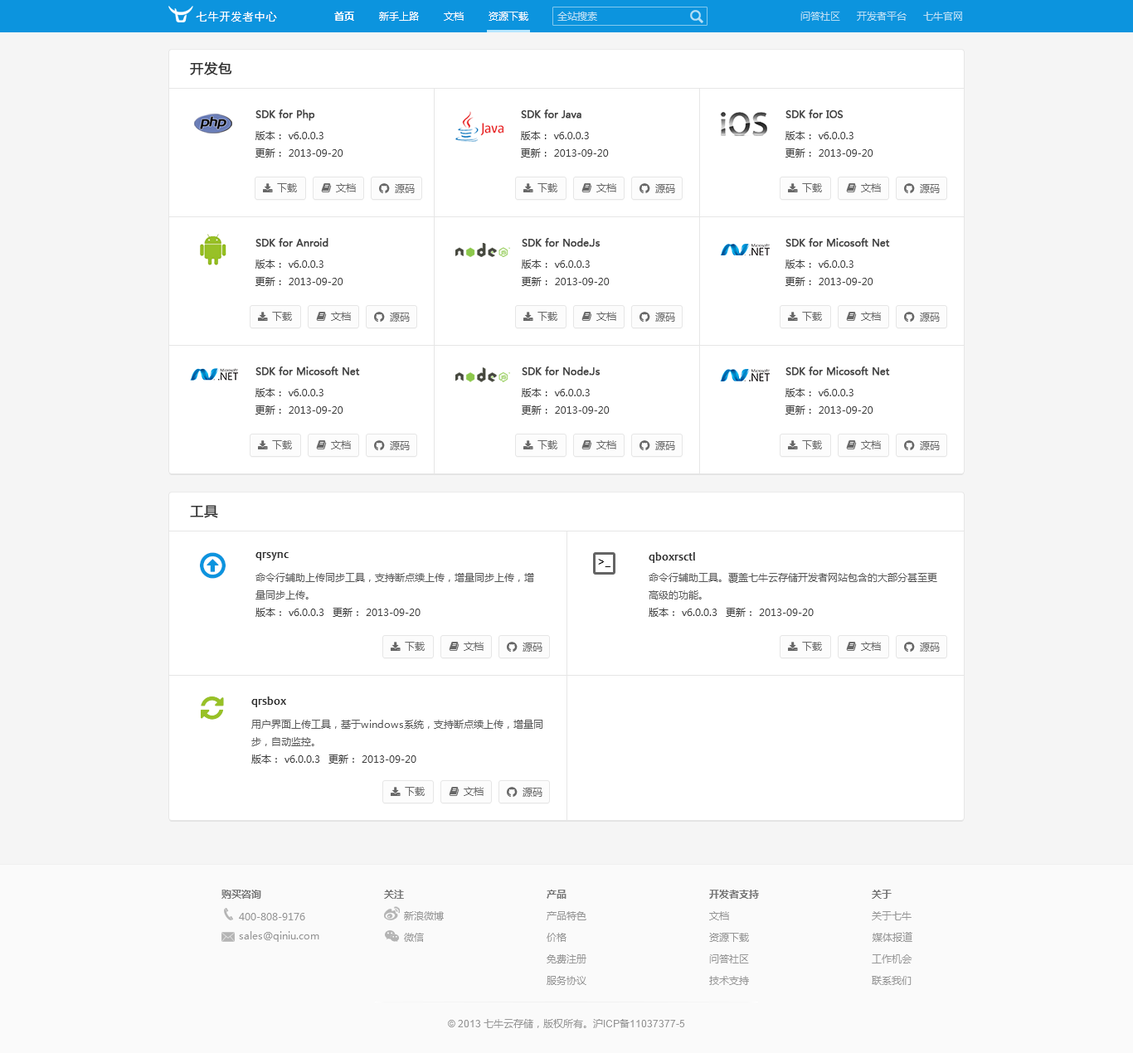
<style>
.page{position:relative;width:1133px;height:1053px;background:#ffffff}
.page>*{position:absolute;margin:0}
.t1{font:11.6px "SimHei";color:#ffffff}
.t2{font:9.9px "MicrosoftYaHei-Bold";color:#ffffff}
.t3{font:9.9px "MicrosoftYaHei";color:#ffffff}
.t4{font:9.9px "MicrosoftYaHei";color:#b7dff5}
.t5{font:13.3px "MicrosoftYaHei";color:#323232;font-weight:bold}
.t6{font:9.9px "MicrosoftYaHei";color:#404040;font-weight:bold}
.t7{font:9.9px "MicrosoftYaHei";color:#404040}
.t8{font:9.9px "MicrosoftYaHei";color:#676767}
.t9{font:11.6px "Candara-Bold";color:#323232}
.t10{font:11.6px "MicrosoftYaHei";color:#000000}
.t11{font:9.9px "MicrosoftYaHei";color:#585858}
.t12{font:9.9px "MicrosoftYaHei-Bold";color:#787878}
.t13{font:9.9px "MicrosoftYaHei";color:#969696}
.t14{font:9.9px "ArialMT";color:#969696}
</style>
<div class="page">
<p class="t1" style="left:196px;top:12px;width:81px;height:10px">七牛开发者中心</p>
<p class="t2" style="left:334px;top:12px;width:20px;height:9px">首页</p>
<p class="t3" style="left:379px;top:12px;width:40px;height:9px">新手上路</p>
<p class="t3" style="left:444px;top:12px;width:19px;height:9px">文档</p>
<p class="t3" style="left:488px;top:12px;width:40px;height:9px">资源下载</p>
<p class="t4" style="left:557px;top:12px;width:40px;height:9px">全站搜索</p>
<p class="t4" style="left:800px;top:12px;width:40px;height:9px">问答社区</p>
<p class="t4" style="left:856px;top:12px;width:50px;height:9px">开发者平台</p>
<p class="t4" style="left:923px;top:12px;width:39px;height:9px">七牛官网</p>
<p class="t5" style="left:190px;top:62px;width:42px;height:13px">开发包</p>
<p class="t6" style="left:255px;top:109px;width:60px;height:12px">SDK for Php</p>
<p class="t6" style="left:521px;top:109px;width:60px;height:10px">SDK for Java</p>
<p class="t6" style="left:785px;top:109px;width:58px;height:10px">SDK for IOS</p>
<p class="t7" style="left:255px;top:131px;width:68px;height:9px">版本： v6.0.0.3</p>
<p class="t7" style="left:521px;top:131px;width:68px;height:9px">版本： v6.0.0.3</p>
<p class="t7" style="left:785px;top:131px;width:68px;height:9px">版本： v6.0.0.3</p>
<p class="t7" style="left:255px;top:148px;width:88px;height:10px">更新： 2013-09-20</p>
<p class="t7" style="left:521px;top:148px;width:88px;height:10px">更新： 2013-09-20</p>
<p class="t7" style="left:785px;top:148px;width:88px;height:10px">更新： 2013-09-20</p>
<p class="t8" style="left:277px;top:183px;width:20px;height:9px">下载</p>
<p class="t8" style="left:336px;top:183px;width:20px;height:9px">文档</p>
<p class="t8" style="left:395px;top:184px;width:20px;height:9px">源码</p>
<p class="t8" style="left:537px;top:183px;width:20px;height:9px">下载</p>
<p class="t8" style="left:596px;top:183px;width:20px;height:9px">文档</p>
<p class="t8" style="left:655px;top:184px;width:20px;height:9px">源码</p>
<p class="t8" style="left:802px;top:183px;width:20px;height:9px">下载</p>
<p class="t8" style="left:861px;top:183px;width:19px;height:9px">文档</p>
<p class="t8" style="left:919px;top:184px;width:20px;height:9px">源码</p>
<p class="t6" style="left:255px;top:238px;width:73px;height:9px">SDK for Anroid</p>
<p class="t6" style="left:521px;top:238px;width:79px;height:9px">SDK for Node.Js</p>
<p class="t6" style="left:785px;top:238px;width:105px;height:9px">SDK for Micosoft Net</p>
<p class="t7" style="left:255px;top:259px;width:68px;height:10px">版本： v6.0.0.3</p>
<p class="t7" style="left:521px;top:259px;width:68px;height:10px">版本： v6.0.0.3</p>
<p class="t7" style="left:785px;top:259px;width:68px;height:10px">版本： v6.0.0.3</p>
<p class="t7" style="left:255px;top:277px;width:88px;height:9px">更新： 2013-09-20</p>
<p class="t7" style="left:521px;top:277px;width:88px;height:9px">更新： 2013-09-20</p>
<p class="t7" style="left:785px;top:277px;width:88px;height:9px">更新： 2013-09-20</p>
<p class="t8" style="left:272px;top:312px;width:20px;height:9px">下载</p>
<p class="t8" style="left:331px;top:312px;width:20px;height:9px">文档</p>
<p class="t8" style="left:390px;top:313px;width:20px;height:9px">源码</p>
<p class="t8" style="left:537px;top:312px;width:20px;height:9px">下载</p>
<p class="t8" style="left:596px;top:312px;width:20px;height:9px">文档</p>
<p class="t8" style="left:655px;top:313px;width:20px;height:9px">源码</p>
<p class="t8" style="left:802px;top:312px;width:20px;height:9px">下载</p>
<p class="t8" style="left:861px;top:312px;width:19px;height:9px">文档</p>
<p class="t8" style="left:919px;top:313px;width:20px;height:9px">源码</p>
<p class="t6" style="left:255px;top:366px;width:105px;height:10px">SDK for Micosoft Net</p>
<p class="t6" style="left:521px;top:366px;width:79px;height:10px">SDK for Node.Js</p>
<p class="t6" style="left:785px;top:366px;width:105px;height:10px">SDK for Micosoft Net</p>
<p class="t7" style="left:255px;top:388px;width:68px;height:9px">版本： v6.0.0.3</p>
<p class="t7" style="left:521px;top:388px;width:68px;height:9px">版本： v6.0.0.3</p>
<p class="t7" style="left:785px;top:388px;width:68px;height:9px">版本： v6.0.0.3</p>
<p class="t7" style="left:255px;top:405px;width:88px;height:10px">更新： 2013-09-20</p>
<p class="t7" style="left:521px;top:405px;width:88px;height:10px">更新： 2013-09-20</p>
<p class="t7" style="left:785px;top:405px;width:88px;height:10px">更新： 2013-09-20</p>
<p class="t8" style="left:272px;top:440px;width:20px;height:9px">下载</p>
<p class="t8" style="left:331px;top:440px;width:20px;height:9px">文档</p>
<p class="t8" style="left:390px;top:441px;width:20px;height:9px">源码</p>
<p class="t8" style="left:537px;top:440px;width:20px;height:9px">下载</p>
<p class="t8" style="left:596px;top:440px;width:20px;height:9px">文档</p>
<p class="t8" style="left:655px;top:441px;width:20px;height:9px">源码</p>
<p class="t8" style="left:802px;top:440px;width:20px;height:9px">下载</p>
<p class="t8" style="left:861px;top:440px;width:19px;height:9px">文档</p>
<p class="t8" style="left:919px;top:441px;width:20px;height:9px">源码</p>
<p class="t5" style="left:190px;top:505px;width:28px;height:13px">工具</p>
<p class="t9" style="left:255px;top:552px;width:34px;height:8px">qrsync</p>
<p class="t9" style="left:648px;top:552px;width:47px;height:11px">qboxrsctl</p>
<p class="t10" style="left:598px;top:559px;width:12px;height:8px">&gt;_</p>
<p class="t11" style="left:255px;top:573px;width:279px;height:26px">命令行辅助上传同步工具，支持断点续上传，增量同步上传，增<br>量同步上传。</p>
<p class="t11" style="left:648px;top:573px;width:289px;height:26px">命令行辅助工具。覆盖七牛云存储开发者网站包含的大部分甚至更<br>高级的功能。</p>
<p class="t7" style="left:255px;top:608px;width:69px;height:9px">版本： v6.0.0.3</p>
<p class="t7" style="left:332px;top:608px;width:88px;height:9px">更新： 2013-09-20</p>
<p class="t7" style="left:648px;top:608px;width:69px;height:9px">版本： v6.0.0.3</p>
<p class="t7" style="left:725px;top:608px;width:88px;height:9px">更新： 2013-09-20</p>
<p class="t8" style="left:405px;top:642px;width:19px;height:9px">下载</p>
<p class="t8" style="left:463px;top:642px;width:20px;height:9px">文档</p>
<p class="t8" style="left:802px;top:642px;width:20px;height:9px">下载</p>
<p class="t8" style="left:861px;top:642px;width:19px;height:9px">文档</p>
<p class="t8" style="left:522px;top:643px;width:20px;height:9px">源码</p>
<p class="t8" style="left:919px;top:643px;width:20px;height:9px">源码</p>
<p class="t9" style="left:251px;top:696px;width:35px;height:11px">qrsbox</p>
<p class="t11" style="left:251px;top:720px;width:291px;height:26px">用户界面上传工具，基于windows系统，支持断点续上传，增量同<br>步，自动监控。</p>
<p class="t7" style="left:251px;top:754px;width:69px;height:10px">版本： v6.0.0.3</p>
<p class="t7" style="left:328px;top:754px;width:88px;height:10px">更新： 2013-09-20</p>
<p class="t8" style="left:405px;top:787px;width:19px;height:9px">下载</p>
<p class="t8" style="left:463px;top:787px;width:20px;height:9px">文档</p>
<p class="t8" style="left:522px;top:788px;width:20px;height:9px">源码</p>
<p class="t12" style="left:221px;top:890px;width:40px;height:9px">购买咨询</p>
<p class="t12" style="left:384px;top:890px;width:20px;height:9px">关注</p>
<p class="t12" style="left:546px;top:890px;width:20px;height:9px">产品</p>
<p class="t12" style="left:709px;top:890px;width:50px;height:9px">开发者支持</p>
<p class="t12" style="left:871px;top:890px;width:20px;height:9px">关于</p>
<p class="t13" style="left:239px;top:913px;width:66px;height:7px">400-808-9176</p>
<p class="t13" style="left:404px;top:911px;width:40px;height:9px">新浪微博</p>
<p class="t13" style="left:546px;top:911px;width:40px;height:9px">产品特色</p>
<p class="t13" style="left:709px;top:911px;width:20px;height:9px">文档</p>
<p class="t13" style="left:871px;top:911px;width:40px;height:9px">关于七牛</p>
<p class="t13" style="left:239px;top:931px;width:80px;height:11px">sales@qiniu.com</p>
<p class="t13" style="left:404px;top:933px;width:20px;height:9px">微信</p>
<p class="t13" style="left:546px;top:933px;width:20px;height:9px">价格</p>
<p class="t13" style="left:709px;top:933px;width:40px;height:9px">资源下载</p>
<p class="t13" style="left:871px;top:932px;width:41px;height:10px">媒体报道</p>
<p class="t13" style="left:546px;top:954px;width:40px;height:9px">免费注册</p>
<p class="t13" style="left:709px;top:954px;width:40px;height:9px">问答社区</p>
<p class="t13" style="left:871px;top:954px;width:41px;height:9px">工作机会</p>
<p class="t13" style="left:546px;top:976px;width:40px;height:9px">服务协议</p>
<p class="t13" style="left:709px;top:976px;width:40px;height:9px">技术支持</p>
<p class="t13" style="left:871px;top:976px;width:40px;height:9px">联系我们</p>
<p class="t13" style="left:448px;top:1019px;width:237px;height:9px"><span class="t14">© 2013 </span>七牛云存储，版权所有。沪<span class="t14">ICP</span>备<span class="t14">11037377-5</span></p>
</div>
